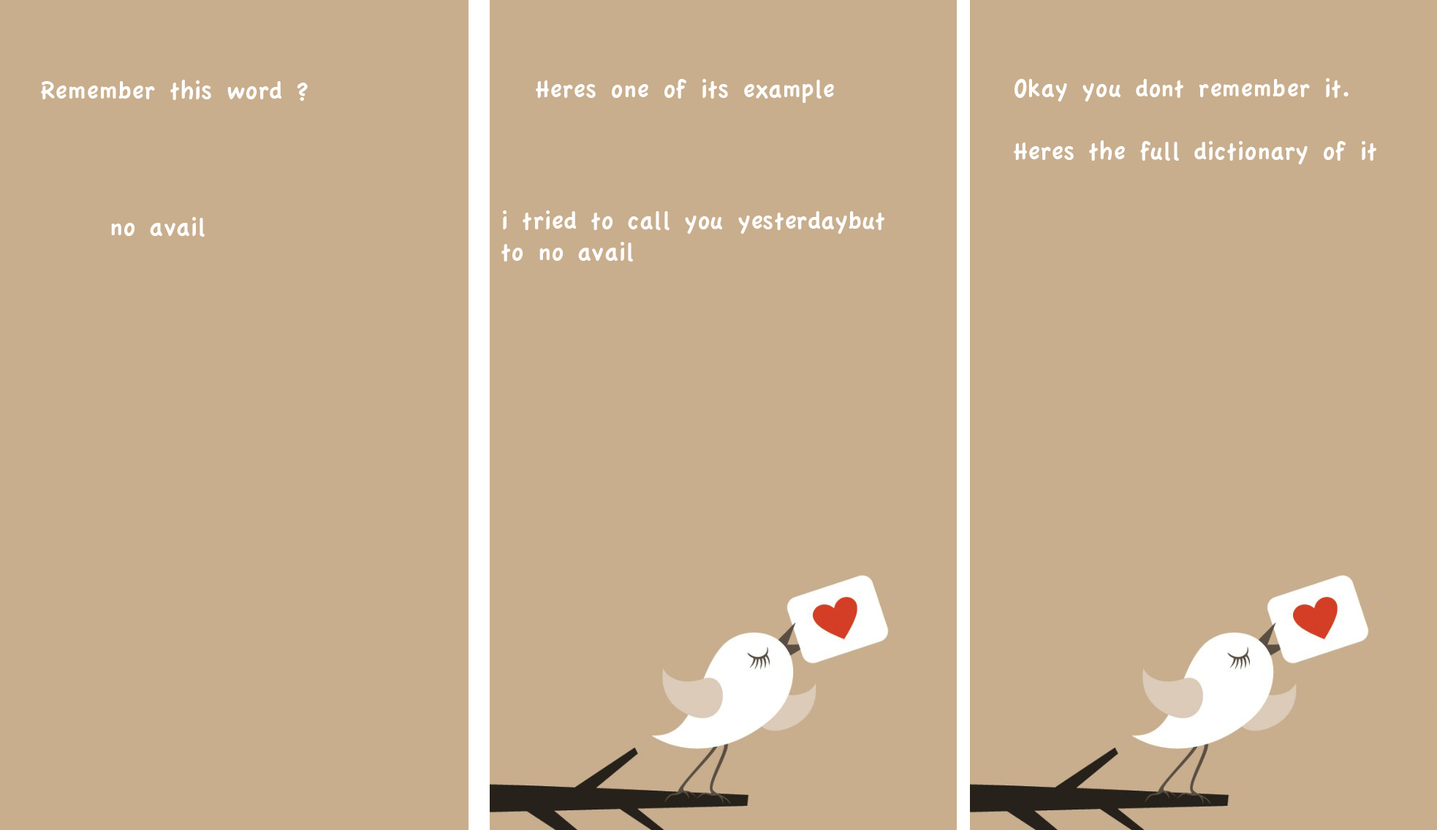
<style>
.page{position:relative;width:1437px;height:830px;background:#c8ae8d}
.page>*{position:absolute;margin:0}
.t1{font:26.3px "AppleCasual";color:#fefefe}
</style>
<div class="page">
<p class="t1" style="left:41px;top:80px;width:267px;height:21px">Remember this word ?</p>
<p class="t1" style="left:536px;top:79px;width:298px;height:24px">Heres one of its example</p>
<p class="t1" style="left:1013px;top:78px;width:363px;height:86px">Okay you dont remember it.<br><br>Heres the full dictionary of it</p>
<p class="t1" style="left:111px;top:217px;width:94px;height:20px">no avail</p>
<p class="t1" style="left:501px;top:210px;width:383px;height:52px">i tried to call you yesterdaybut <br>to no avail</p>
</div>
